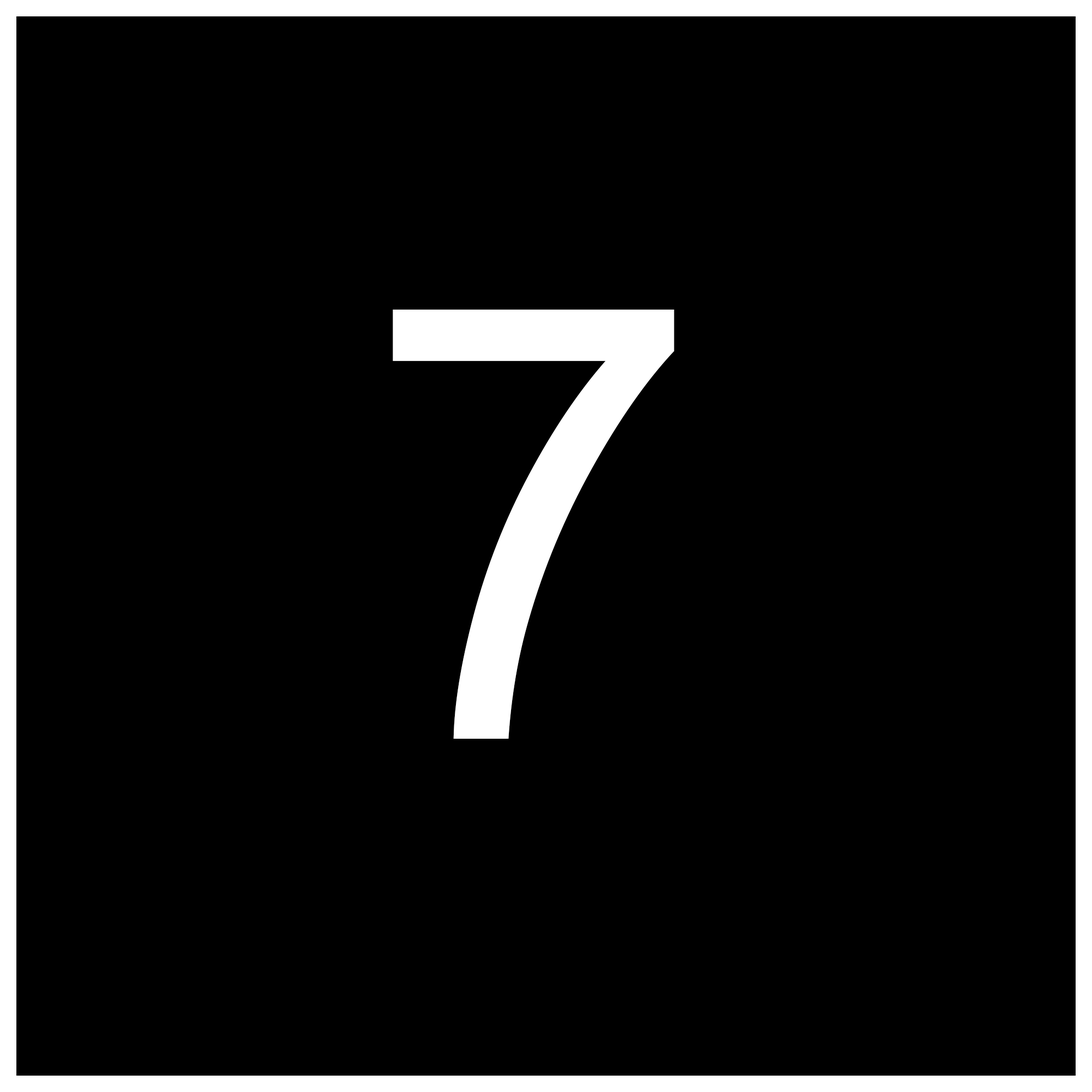
<style>
.page{position:relative;width:1092px;height:1092px;background:#000000}
.page>*{position:absolute;margin:0}
.t1{font:606.7px "ArialMT";color:#ffffff}
</style>
<div class="page">
<p class="t1" style="left:393px;top:310px;width:281px;height:429px">7</p>
</div>
